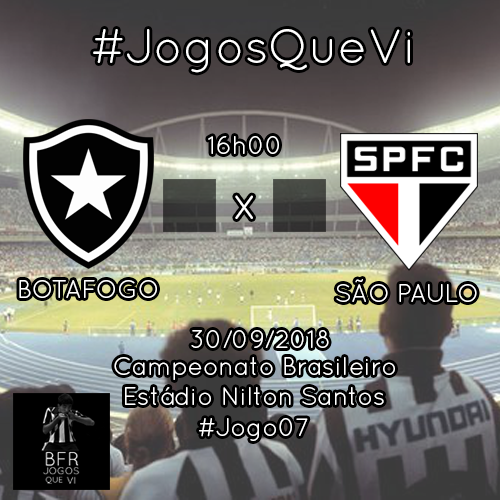
<style>
.page{position:relative;width:500px;height:500px}
.page>*{position:absolute;margin:0}
.t1{font:48px "QuicksandBook-Regular";color:#ffffff}
.t2{font:25px "QuicksandBook-Regular";color:#ffffff}
</style>
<div class="page">
<p class="t1" style="left:93px;top:29px;width:317px;height:44px">#JogosQueVi</p>
<p class="t2" style="left:208px;top:136px;width:71px;height:18px">16h00</p>
<p class="t1" style="left:235px;top:195px;width:18px;height:24px">x</p>
<p class="t2" style="left:19px;top:280px;width:138px;height:18px">BOTAFOGO</p>
<p class="t2" style="left:336px;top:279px;width:141px;height:23px">SÃO PAULO</p>
<p class="t2" style="left:191px;top:330px;width:138px;height:18px">30/09/2018</p>
<p class="t2" style="left:114px;top:357px;width:281px;height:23px">Campeonato Brasileiro</p>
<p class="t2" style="left:125px;top:387px;width:259px;height:18px">Estádio Nilton Santos</p>
<p class="t2" style="left:199px;top:418px;width:109px;height:23px">#Jogo07</p>
</div>
